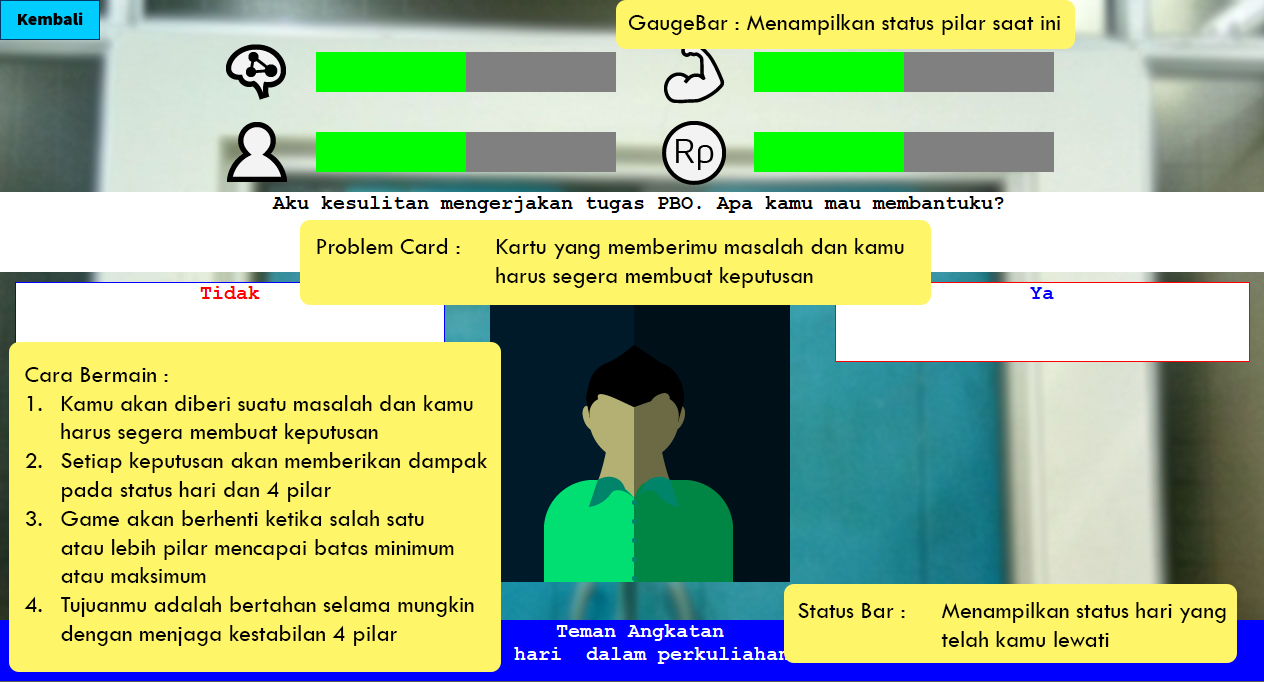
<style>
.page{position:relative;width:1264px;height:682px;background:#fff568}
.page>*{position:absolute;margin:0}
.t1{font:24px "TwCenMT-Regular";color:#000000}
</style>
<div class="page">
<p class="t1" style="left:628px;top:14px;width:433px;height:21px">GaugeBar : Menampilkan status pilar saat ini</p>
<p class="t1" style="left:317px;top:238px;width:587px;height:50px">Problem Card :  Kartu yang memberimu masalah dan kamu<br>     harus segera membuat keputusan</p>
<p class="t1" style="left:24px;top:367px;width:463px;height:279px">Cara Bermain :<br>1.  Kamu akan diberi suatu masalah dan kamu<br> harus segera membuat keputusan<br>2. Setiap keputusan akan memberikan dampak<br> pada status hari dan 4 pilar<br>3. Game akan berhenti ketika salah satu<br> atau lebih pilar mencapai batas minimum<br> atau maksimum<br>4. Tujuanmu adalah bertahan selama mungkin<br> dengan menjaga kestabilan 4 pilar</p>
<p class="t1" style="left:798px;top:602px;width:428px;height:45px">Status Bar : Menampilkan status hari yang <br>    telah kamu lewati</p>
</div>
